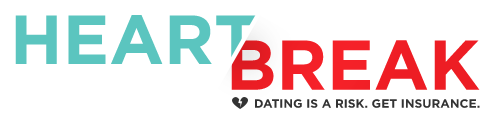
<style>
.page{position:relative;width:498px;height:116px;background:#ffffff}
.page>*{position:absolute;margin:0}
.t1{font:69.4px "Gotham-Bold";color:#5bc5bf}
.t2{font:12px "Gotham-Bold";color:#333333}
</style>
<div class="page">
<p class="t1" style="left:15px;top:15px;width:242px;height:49px">HEART</p>
<p class="t2" style="left:255px;top:99px;width:225px;height:9px">DATING IS A RISK. GET INSURANCE.</p>
</div>
